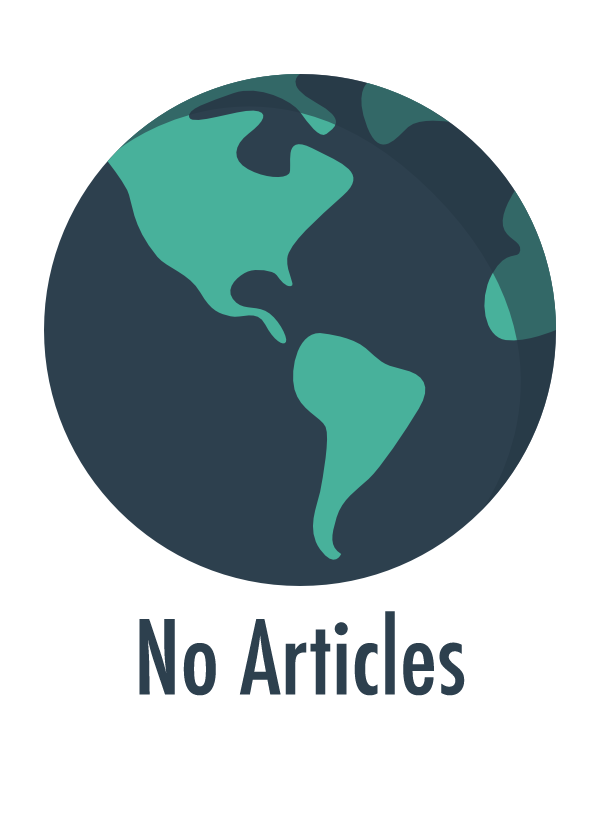
<style>
.page{position:relative;width:600px;height:820px;background:#ffffff}
.page>*{position:absolute;margin:0}
.t1{font:100px "Futura-CondensedMedium";color:#2d404e}
</style>
<div class="page">
<p class="t1" style="left:139px;top:611px;width:326px;height:85px">No Articles</p>
</div>
